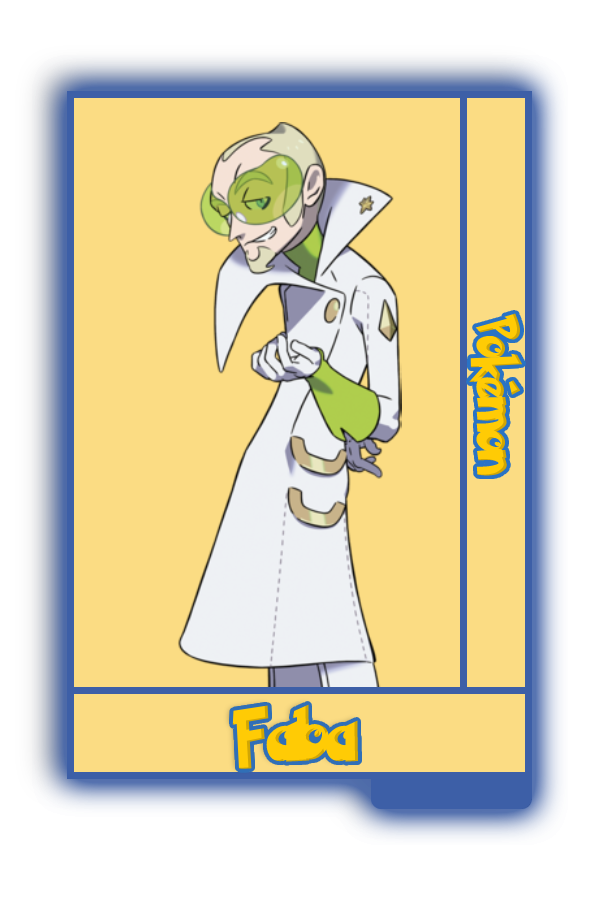
<style>
.page{position:relative;width:600px;height:900px;background:#fbdc83}
.page>*{position:absolute;margin:0}
.t1{font:48.8px "PokemonSolidNormal";color:#ffcb05;scale:0.8 1}
.t2{font:60.1px "PokemonSolidNormal";color:#ffcb05;scale:0.96 1}
</style>
<div class="page">
<p class="t1" style="left:469px;top:313px;width:54px;height:163px;rotate:90deg">Pokémon</p>
<p class="t2" style="left:232px;top:704px;width:127px;height:65px">Faba</p>
</div>
